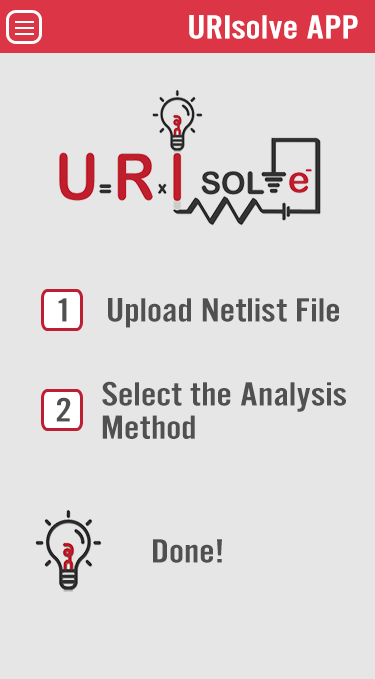
<style>
.page{position:relative;width:375px;height:679px;background:#e6e6e6}
.page>*{position:absolute;margin:0}
.t1{font:35px "AlternateGotNo2D";color:#ffffff;scale:1.29 1}
.t2{font:35px "AlternateGotNo2D";color:#515050;scale:1.29 1}
</style>
<div class="page">
<p class="t1" style="left:189px;top:15px;width:169px;height:24px">URIsolve APP</p>
<p class="t2" style="left:58px;top:298px;width:9px;height:24px">1</p>
<p class="t2" style="left:108px;top:298px;width:231px;height:30px">Upload Netlist File</p>
<p class="t2" style="left:102px;top:381px;width:244px;height:31px">Select the Analysis</p>
<p class="t2" style="left:56px;top:397px;width:15px;height:25px">2</p>
<p class="t2" style="left:102px;top:415px;width:93px;height:24px">Method</p>
<p class="t2" style="left:153px;top:539px;width:69px;height:24px">Done!</p>
</div>
